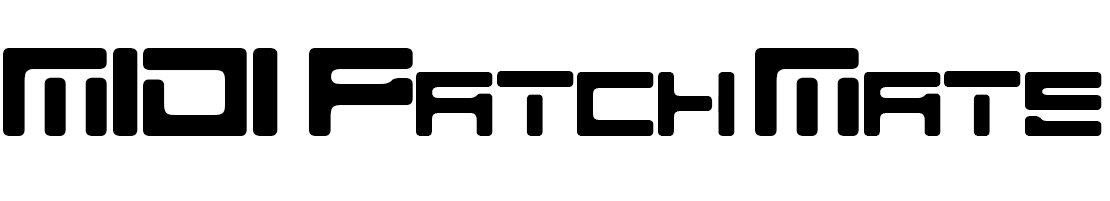
<style>
.page{position:relative;width:1110px;height:201px;background:#ffffff}
.page>*{position:absolute;margin:0}
.t1{font:125px "Teio";color:#000000}
.t2{font:91.7px "Teio";color:#000000}
</style>
<div class="page">
<p class="t1" style="left:3px;top:48px;width:275px;height:88px">MIDI</p>
<p class="t1" style="left:308px;top:48px;width:105px;height:88px">P</p>
<p class="t1" style="left:755px;top:48px;width:104px;height:88px">M</p>
<p class="t2" style="left:416px;top:71px;width:319px;height:65px">atch</p>
<p class="t2" style="left:864px;top:71px;width:238px;height:65px">ate</p>
</div>
